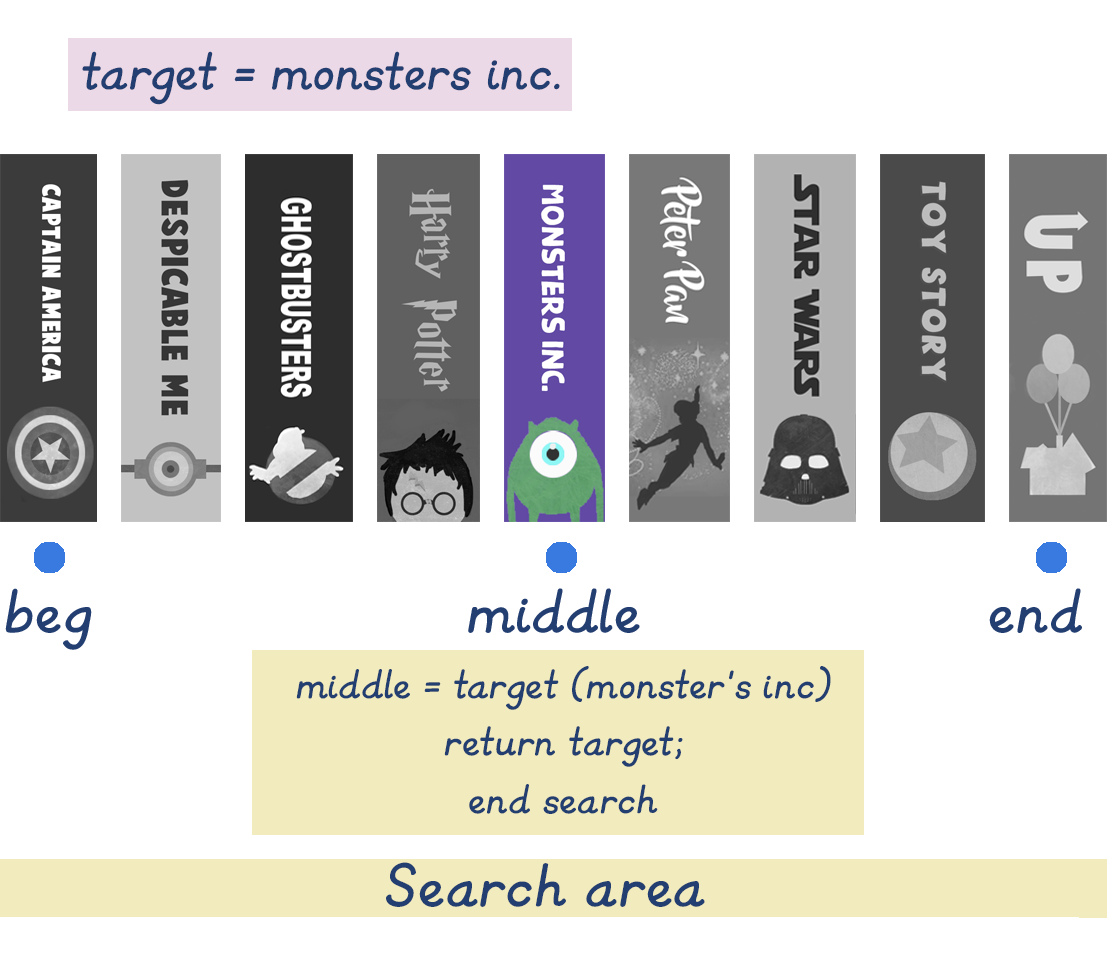
<style>
.page{position:relative;width:1107px;height:975px;background:#ffffff}
.page>*{position:absolute;margin:0}
.t1{font:62px "KGPrimaryItalics";color:#233e70}
.t2{font:72px "KGPrimaryItalics";color:#233e70}
.t3{font:48px "KGPrimaryItalics";color:#233e70}
</style>
<div class="page">
<p class="t1" style="left:82px;top:51px;width:478px;height:54px">target = monsters inc.</p>
<p class="t2" style="left:5px;top:588px;width:87px;height:62px">beg</p>
<p class="t2" style="left:468px;top:588px;width:172px;height:45px">middle</p>
<p class="t2" style="left:989px;top:588px;width:93px;height:45px">end</p>
<p class="t3" style="left:296px;top:666px;width:535px;height:148px;text-align:center">middle = target (monster’s inc)<br>return target;<br>end search</p>
<p class="t2" style="left:386px;top:862px;width:319px;height:45px">Search area</p>
</div>
